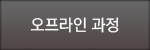
<style>
.page{position:relative;width:150px;height:50px}
.page>*{position:absolute;margin:0}
.t1{font:16px "RixGoM";color:#ffffff}
</style>
<div class="page">
<p class="t1" style="left:30px;top:17px;width:89px;height:16px">오프라인 과정</p>
</div>
